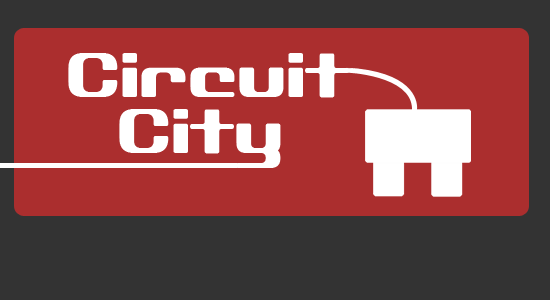
<style>
.page{position:relative;width:550px;height:300px;background:#ab2e2e}
.page>*{position:absolute;margin:0}
.t1{font:50px "D3-Globalism";color:#ffffff}
</style>
<div class="page">
<p class="t1" style="left:68px;top:53px;width:281px;height:45px">Circuit</p>
<p class="t1" style="left:119px;top:109px;width:162px;height:59px">City</p>
</div>
